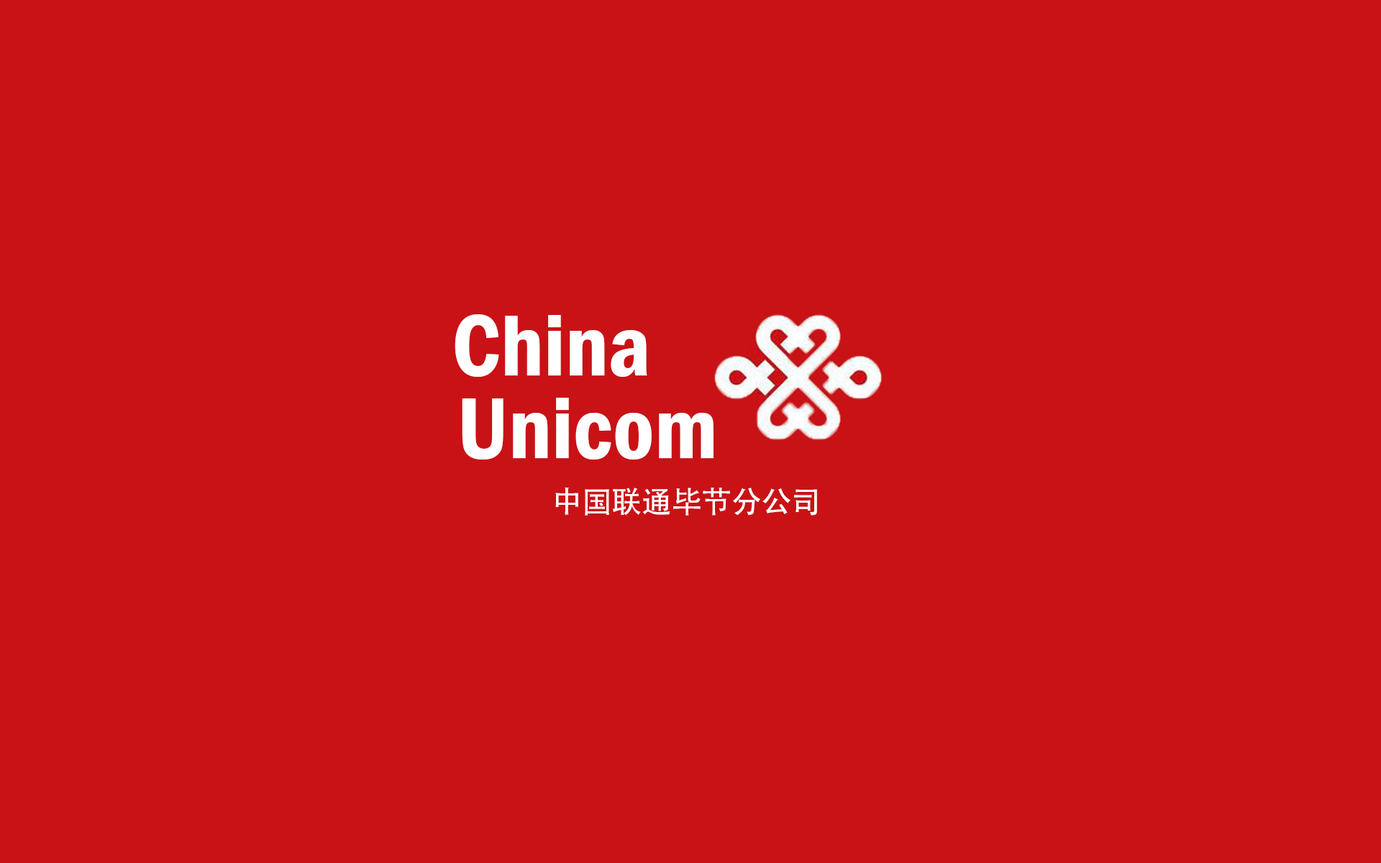
<style>
.page{position:relative;width:1381px;height:863px;background:#c91216}
.page>*{position:absolute;margin:0}
.t1{font:89.9px "FranklinGothic-DemiCond";color:#ffffff}
.t2{font:30px "AdobeHeitiStd-Regular";color:#ffffff}
</style>
<div class="page">
<p class="t1" style="left:455px;top:314px;width:192px;height:63px">China</p>
<p class="t1" style="left:462px;top:398px;width:252px;height:62px">Unicom</p>
<p class="t2" style="left:555px;top:487px;width:262px;height:29px">中国联通毕节分公司</p>
</div>
